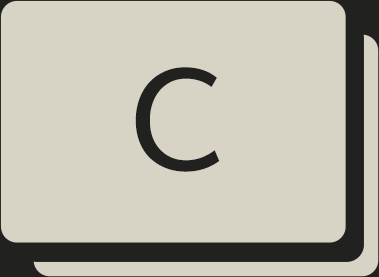
<style>
.page{position:relative;width:379px;height:277px;background:#d8d4c5}
.page>*{position:absolute;margin:0}
.t1{font:141.8px "Muli";letter-spacing:0.05em;color:#212120}
</style>
<div class="page">
<p class="t1" style="left:135px;top:67px;width:85px;height:105px">C</p>
</div>
